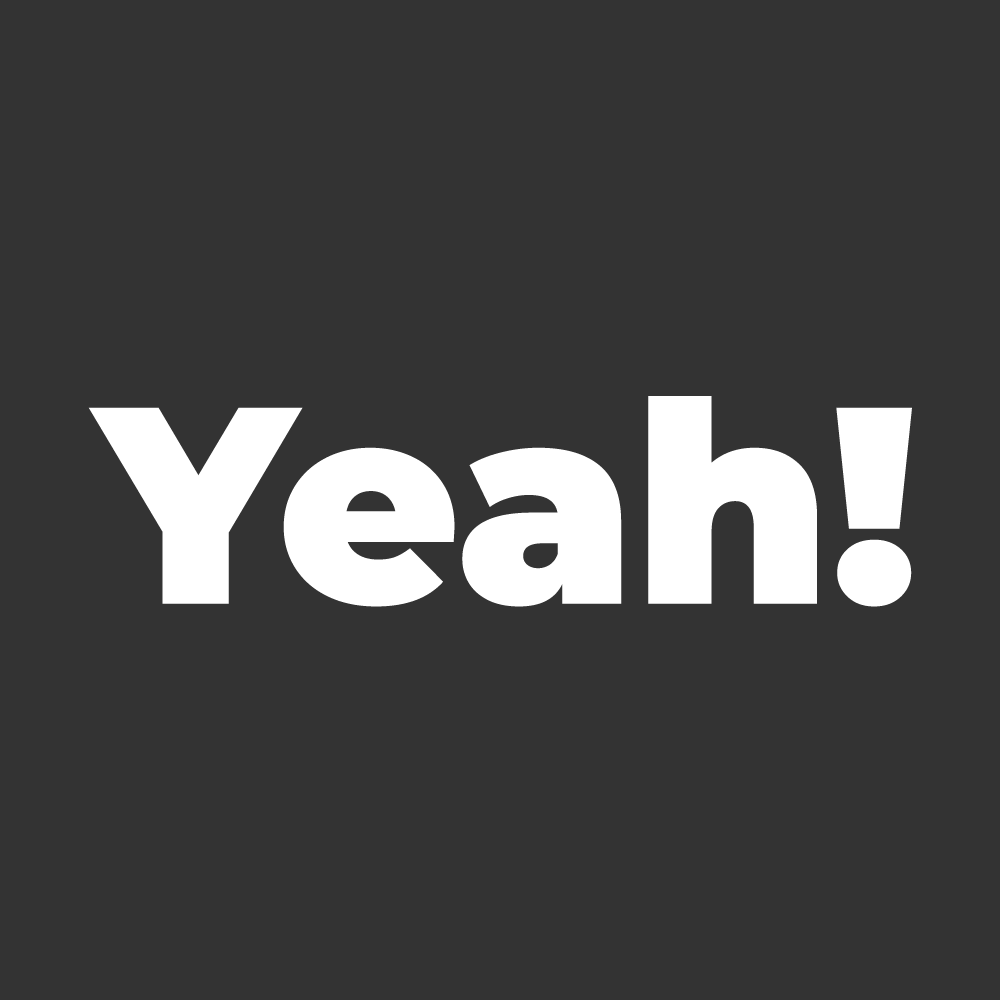
<style>
.page{position:relative;width:1000px;height:1000px;background:#333333}
.page>*{position:absolute;margin:0}
.t1{font:279.5px "Montserrat-Black";color:#ffffff}
</style>
<div class="page">
<p class="t1" style="left:88px;top:396px;width:824px;height:211px">Yeah!</p>
</div>
